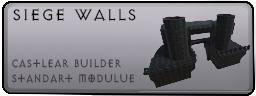
<style>
.page{position:relative;width:256px;height:96px}
.page>*{position:absolute;margin:0}
.t1{font:18px "Diabolic-Bold";color:#000000}
.t2{font:12.2px "Diabolic-Bold";color:#3c333a;scale:0.87 1}
</style>
<div class="page">
<p class="t1" style="left:13px;top:8px;width:123px;height:13px">Siege Walls</p>
<p class="t2" style="left:12px;top:59px;width:122px;height:24px">Castlear builder<br>standart modulue</p>
</div>
